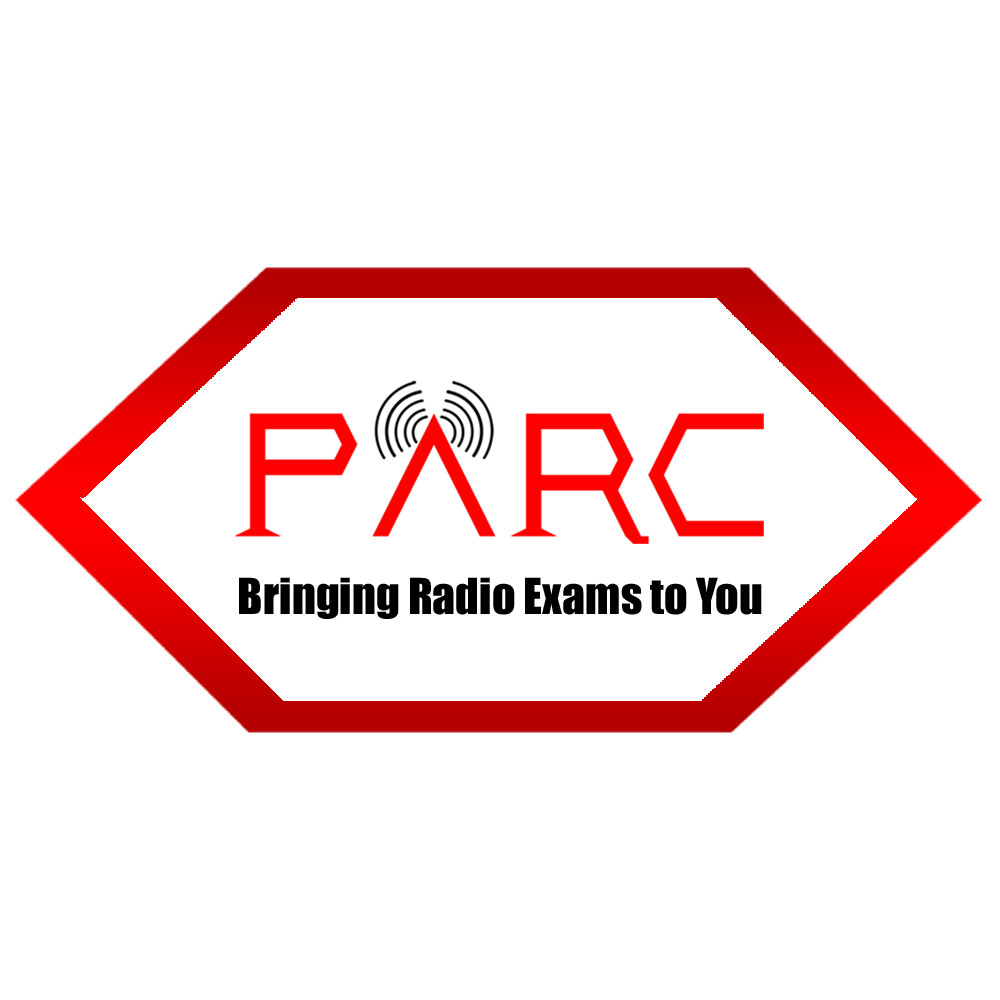
<style>
.page{position:relative;width:1000px;height:1000px;background:#ffffff}
.page>*{position:absolute;margin:0}
.t1{font:45.8px "Impact";color:#000000}
</style>
<div class="page">
<p class="t1" style="left:239px;top:577px;width:523px;height:42px">Bringing Radio Exams to You</p>
</div>
